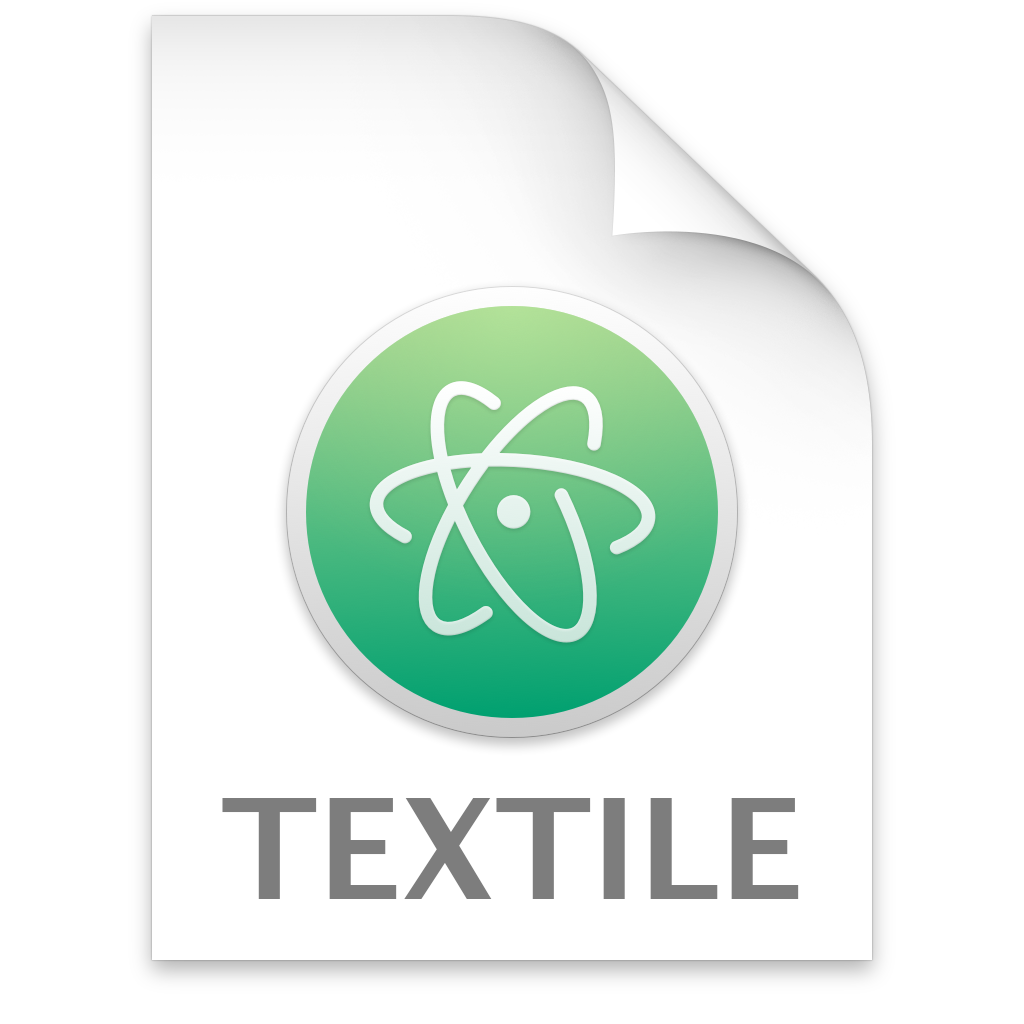
<style>
.page{position:relative;width:1024px;height:1024px;background:#ffffff}
.page>*{position:absolute;margin:0}
.t1{font:140px "LucidaGrande-Bold";color:#7d7d7d}
</style>
<div class="page">
<p class="t1" style="left:222px;top:798px;width:577px;height:101px">TEXTILE</p>
</div>
